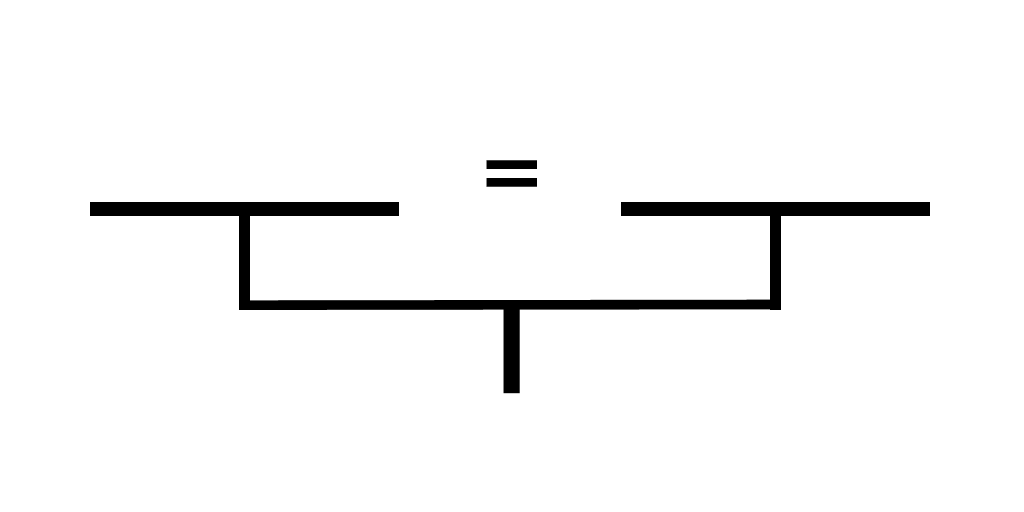
<style>
.page{position:relative;width:1024px;height:512px;background:#ffffff}
.page>*{position:absolute;margin:0}
.t1{font:72px "KozGoPr6N-Heavy";color:#000000}
</style>
<div class="page">
<p class="t1" style="left:486px;top:160px;width:51px;height:27px">＝</p>
</div>
